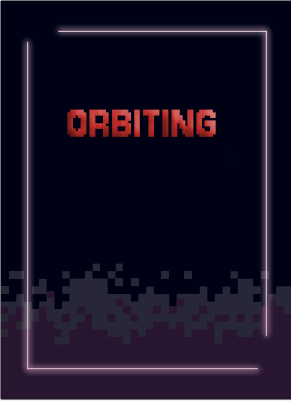
<style>
.page{position:relative;width:291px;height:401px;background:#000115}
.page>*{position:absolute;margin:0}
.t1{font:50px "Jersey10-Regular";letter-spacing:0.025em}
</style>
<div class="page">
<p class="t1" style="left:67px;top:109px;width:149px;height:28px">ORBITING</p>
</div>
